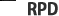
<style>
.page{position:relative;width:59px;height:16px;background:#ffffff}
.page>*{position:absolute;margin:0}
.t1{font:16px "AdobeGothicStd-Bold";color:#303030;font-weight:bold}
</style>
<div class="page">
<p class="t1" style="left:28px;top:2px;width:30px;height:14px">RPD</p>
</div>
